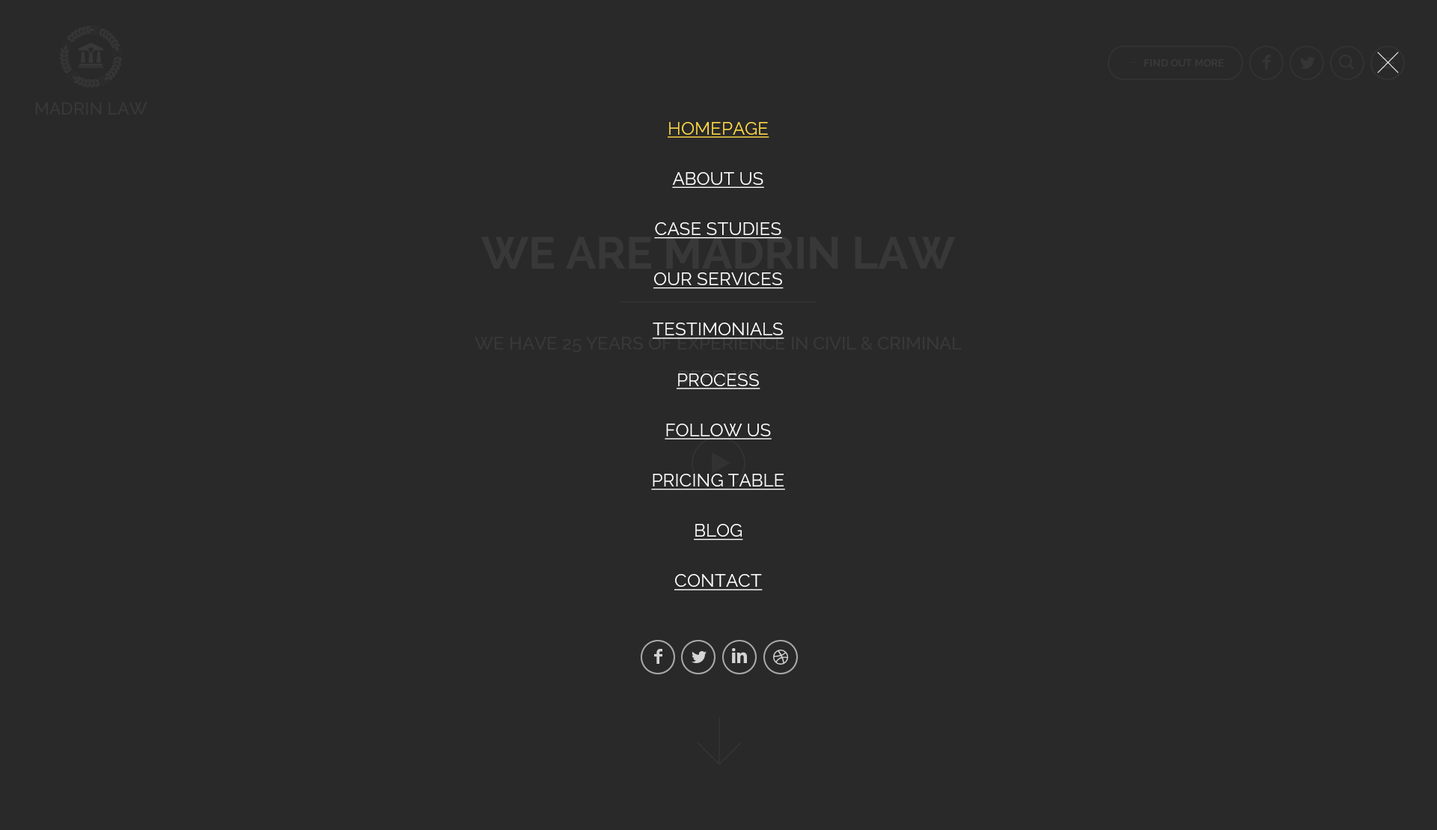
<style>
.page{position:relative;width:1437px;height:830px;background:#292929}
.page>*{position:absolute;margin:0}
.t1{font:10.5px "Raleway-Bold";color:#383838}
.t2{font:17.2px "Raleway-Medium";color:#383838}
.t3{font:18px/50.3px "Raleway";color:#ffffff;text-decoration:underline}
.t4{font:18px/50.3px "Raleway";color:#ffd947;text-decoration:underline}
</style>
<div class="page">
<p class="t1" style="left:1144px;top:59px;width:80px;height:8px">FIND OUT MORE</p>
<p class="t2" style="left:35px;top:102px;width:112px;height:12px">MADRIN LAW</p>
<p class="t3" style="left:651px;top:122px;width:134px;height:468px;text-align:center"><span class="t4">HOMEPAGE<br></span>ABOUT US<br>CASE STUDIES<br>OUR SERVICES<br>TESTIMONIALS<br>PROCESS<br>FOLLOW US<br>PRICING TABLE<br>BLOG<br>CONTACT</p>
</div>
